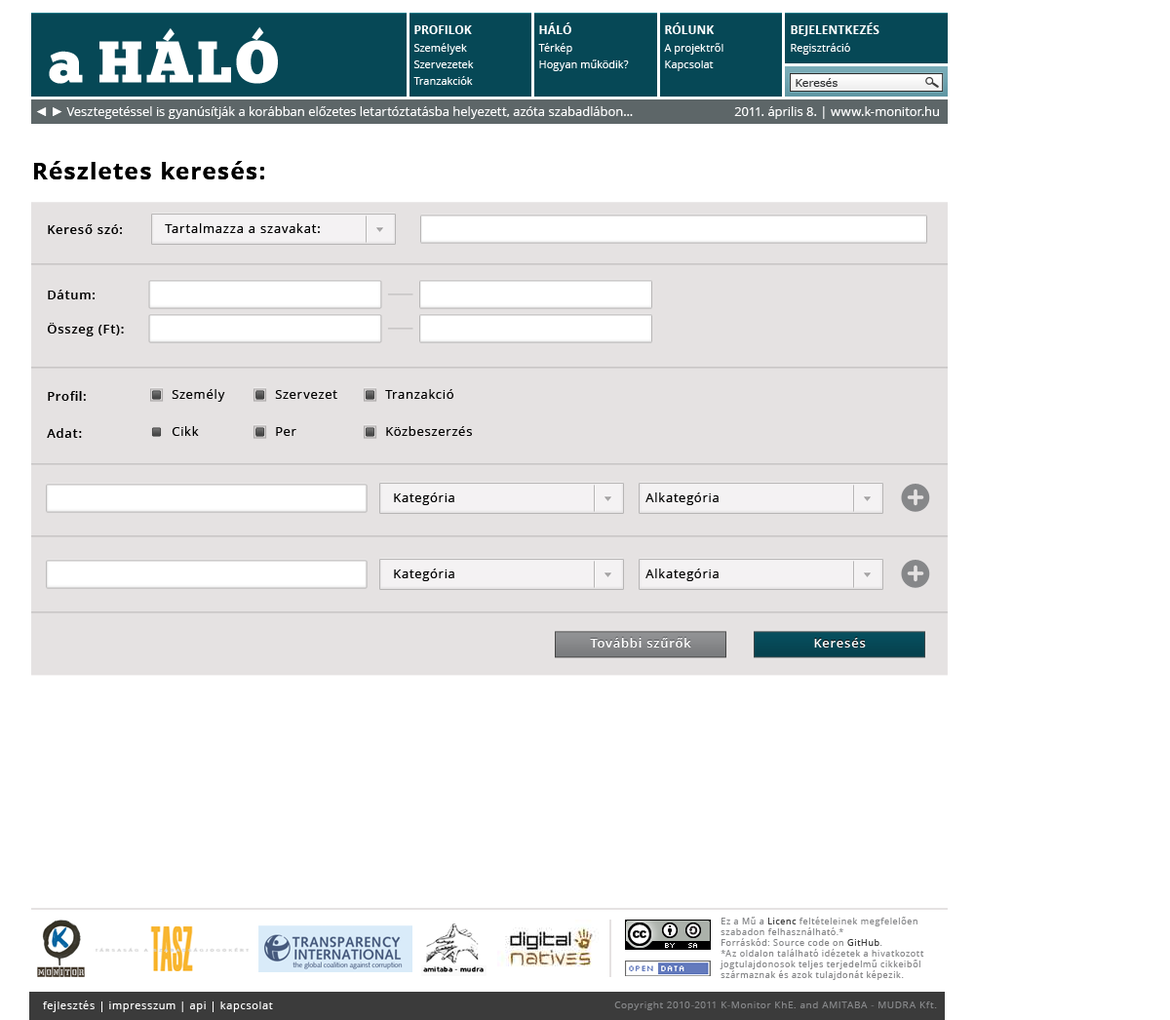
<style>
.page{position:relative;width:1170px;height:1020px;background:#ffffff}
.page>*{position:absolute;margin:0}
.t1{font:58.5px "ChunkFive-Roman";letter-spacing:0.05em;color:#ffffff;text-transform:uppercase}
.t2{font:58.5px "ChunkFive-Roman";letter-spacing:0.05em;color:#ffffff}
.t3{font:11.7px "OpenSans-Bold";color:#ffffff;text-transform:uppercase}
.t4{font:11.7px/17.5px "OpenSans-Bold";color:#ffffff;text-transform:uppercase}
.t5{font:10.7px/17.5px "OpenSans";color:#ffffff}
.t6{font:10.7px/16.6px "OpenSans";color:#ffffff}
.t7{font:10.7px "Verdana";color:#2f3032}
.t8{font:12.7px "OpenSans";color:#ffffff}
.t9{font:12.7px "ArialMT";color:#ffffff}
.t10{font:23.4px "OpenSans-Bold";letter-spacing:0.06em;color:#000000}
.t11{font:12.7px "OpenSans-Semibold";letter-spacing:0.06em;color:#000000}
.t12{font:12.7px "OpenSans";letter-spacing:0.06em;color:#000000}
.t13{font:12.7px/34.1px "OpenSans-Semibold";letter-spacing:0.06em;color:#000000}
.t14{font:12.7px "OpenSans-Semibold";letter-spacing:0.06em;color:#ffffff}
.t15{font:8.8px/10.7px "OpenSans";letter-spacing:0.06em;color:#868789}
.t16{font:8.8px/10.7px "OpenSans";letter-spacing:0.06em;color:#3b3b3b}
.t17{font:10.7px "OpenSans";letter-spacing:0.06em;color:#ffffff}
.t18{font:9.7px "OpenSans";letter-spacing:0.06em;color:#868789}
</style>
<div class="page">
<p class="t1" style="left:49px;top:26px;width:229px;height:58px"><span class="t2">a </span>háló</p>
<p class="t3" style="left:414px;top:25px;width:58px;height:9px">Profilok</p>
<p class="t3" style="left:539px;top:22px;width:32px;height:12px">háló</p>
<p class="t3" style="left:665px;top:22px;width:49px;height:12px">Rólunk</p>
<p class="t4" style="left:790px;top:22px;width:89px;height:33px">Bejelentkezés<br><span class="t5">Regisztráció</span></p>
<p class="t6" style="left:413px;top:43px;width:61px;height:42px">Személyek<br>Szervezetek<br>Tranzakciók</p>
<p class="t6" style="left:538px;top:43px;width:91px;height:28px">Térkép<br>Hogyan működik?</p>
<p class="t6" style="left:664px;top:43px;width:59px;height:28px">A projektről<br>Kapcsolat</p>
<p class="t7" style="left:795px;top:78px;width:42px;height:9px">Keresés</p>
<p class="t8" style="left:36px;top:106px;width:597px;height:13px"><span class="t9">◄ ► </span>Vesztegetéssel is gyanúsítják a korábban előzetes letartóztatásba helyezett, azóta szabadlábon...</p>
<p class="t8" style="left:734px;top:106px;width:205px;height:13px">2011. április 8. | www.k-monitor.hu</p>
<p class="t10" style="left:34px;top:161px;width:230px;height:18px">Részletes keresés:</p>
<p class="t10" style="left:34px;top:161px;width:230px;height:18px">Részletes keresés:</p>
<p class="t11" style="left:48px;top:224px;width:74px;height:10px">Kereső szó:</p>
<p class="t11" style="left:48px;top:224px;width:74px;height:10px">Kereső szó:</p>
<p class="t12" style="left:165px;top:223px;width:155px;height:10px">Tartalmazza a szavakat:</p>
<p class="t12" style="left:165px;top:223px;width:155px;height:10px">Tartalmazza a szavakat:</p>
<p class="t13" style="left:47px;top:289px;width:77px;height:47px">Dátum:<br>Összeg (Ft):</p>
<p class="t13" style="left:47px;top:289px;width:77px;height:47px">Dátum:<br>Összeg (Ft):</p>
<p class="t12" style="left:172px;top:389px;width:53px;height:13px">Személy</p>
<p class="t12" style="left:172px;top:389px;width:53px;height:13px">Személy</p>
<p class="t12" style="left:275px;top:390px;width:62px;height:9px">Szervezet</p>
<p class="t12" style="left:275px;top:390px;width:62px;height:9px">Szervezet</p>
<p class="t12" style="left:385px;top:389px;width:68px;height:10px">Tranzakció</p>
<p class="t12" style="left:385px;top:389px;width:68px;height:10px">Tranzakció</p>
<p class="t11" style="left:48px;top:391px;width:38px;height:10px">Profil:</p>
<p class="t11" style="left:48px;top:391px;width:38px;height:10px">Profil:</p>
<p class="t12" style="left:172px;top:426px;width:27px;height:10px">Cikk</p>
<p class="t12" style="left:172px;top:426px;width:27px;height:10px">Cikk</p>
<p class="t12" style="left:386px;top:426px;width:86px;height:10px">Közbeszerzés</p>
<p class="t12" style="left:386px;top:426px;width:86px;height:10px">Közbeszerzés</p>
<p class="t11" style="left:47px;top:428px;width:35px;height:10px">Adat:</p>
<p class="t11" style="left:47px;top:428px;width:35px;height:10px">Adat:</p>
<p class="t12" style="left:276px;top:427px;width:20px;height:9px">Per</p>
<p class="t12" style="left:276px;top:427px;width:20px;height:9px">Per</p>
<p class="t12" style="left:394px;top:492px;width:60px;height:13px">Kategória</p>
<p class="t12" style="left:645px;top:492px;width:73px;height:13px">Alkategória</p>
<p class="t12" style="left:394px;top:568px;width:60px;height:13px">Kategória</p>
<p class="t12" style="left:645px;top:568px;width:73px;height:13px">Alkategória</p>
<p class="t14" style="left:590px;top:637px;width:101px;height:10px">További szűrők</p>
<p class="t14" style="left:814px;top:637px;width:52px;height:10px">Keresés</p>
<p class="t15" style="left:719px;top:916px;width:205px;height:64px">Ez a Mű a <span class="t16">Licenc </span>feltételeinek megfelelően szabadon felhasználható.*<br>Forráskód: Source code on <span class="t16">GitHub</span>.<br>*Az oldalon található idézetek a hivatkozott jogtulajdonosok teljes terjedelmű cikkeiből származnak és azok tulajdonát képezik.</p>
<p class="t17" style="left:43px;top:1000px;width:230px;height:12px">fejlesztés | impresszum | api | kapcsolat</p>
<p class="t18" style="left:614px;top:1001px;width:323px;height:9px">Copyright 2010-2011 K-Monitor KhE. and AMITABA - MUDRA Kft.</p>
</div>
